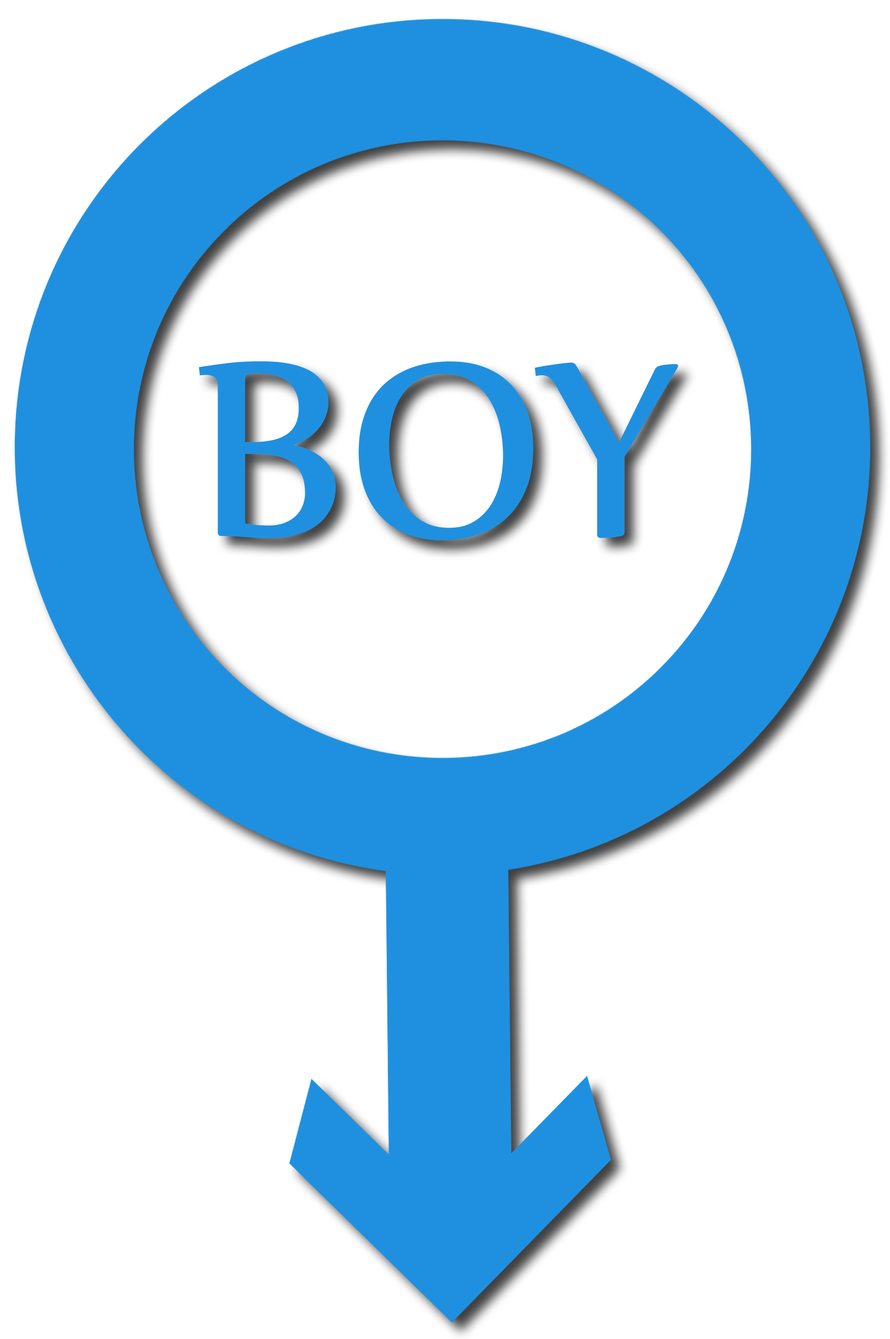
<style>
.page{position:relative;width:890px;height:1339px;background:#ffffff}
.page>*{position:absolute;margin:0}
.t1{font:300.5px "Nyala-Regular";letter-spacing:0.021em;color:#1f90e0}
</style>
<div class="page">
<p class="t1" style="left:199px;top:361px;width:479px;height:179px">BOY</p>
</div>
